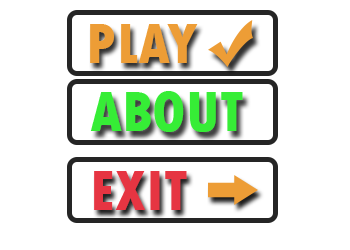
<style>
.page{position:relative;width:350px;height:250px;background:#ffffff}
.page>*{position:absolute;margin:0}
.t1{font:60px "TwCenMT-CondensedExtraBold";color:#ed9d36}
.t2{font:60px "TwCenMT-CondensedExtraBold";color:#36ed36}
.t3{font:60px "TwCenMT-CondensedExtraBold";color:#e63542}
</style>
<div class="page">
<p class="t1" style="left:90px;top:24px;width:108px;height:39px">PLAY</p>
<p class="t2" style="left:90px;top:91px;width:153px;height:41px">ABOUT</p>
<p class="t3" style="left:94px;top:171px;width:93px;height:39px">EXIT</p>
</div>
